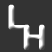
<style>
.page{position:relative;width:52px;height:52px;background:#333333}
.page>*{position:absolute;margin:0}
.t1{font:33.3px "ArialRoundedMTBold";color:#ffffff;font-weight:bold}
.t2{font:33.3px "ArialRoundedMTBold";font-weight:bold}
</style>
<div class="page">
<p class="t1" style="left:8px;top:4px;width:19px;height:26px">L</p>
<p class="t2" style="left:23px;top:24px;width:22px;height:26px">H</p>
</div>
